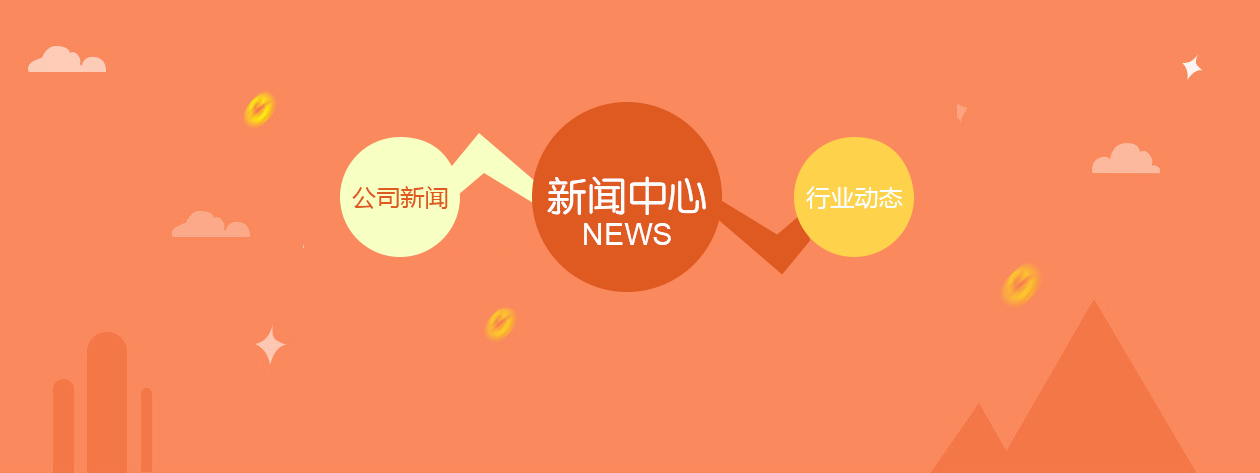
<style>
.page{position:relative;width:1260px;height:473px;background:#fa895d}
.page>*{position:absolute;margin:0}
.t1{font:40px "JZunYuan";letter-spacing:0.01em;color:#fdfdfd}
.t2{font:24px "MicrosoftYaHei";letter-spacing:0.01em;color:#de5a21}
.t3{font:24px "MicrosoftYaHei";letter-spacing:0.01em;color:#f8ffff}
.t4{font:30px "ArialMT";letter-spacing:0.01em;color:#fdfdfd}
</style>
<div class="page">
<p class="t1" style="left:547px;top:176px;width:159px;height:39px">新闻中心</p>
<p class="t2" style="left:352px;top:186px;width:96px;height:23px">公司新闻</p>
<p class="t3" style="left:806px;top:186px;width:97px;height:23px">行业动态</p>
<p class="t4" style="left:584px;top:223px;width:87px;height:22px">NEWS</p>
</div>
